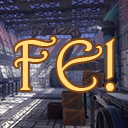
<style>
.page{position:relative;width:128px;height:128px}
.page>*{position:absolute;margin:0}
.t1{font:72px "Harrington";color:#ffdb7b}
</style>
<div class="page">
<p class="t1" style="left:14px;top:37px;width:101px;height:54px">FE!</p>
</div>
